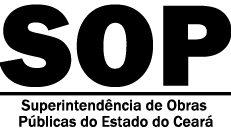
<style>
.page{position:relative;width:231px;height:131px;background:#ffffff}
.page>*{position:absolute;margin:0}
.t1{font:120px "FranklinGothic-Heavy";color:#000000}
.t2{font:16px "FranklinGothic-Medium";color:#000000}
</style>
<div class="page">
<p class="t1" style="left:0px;top:4px;width:232px;height:83px">SOP</p>
<p class="t2" style="left:21px;top:98px;width:186px;height:16px">Superintendência de Obras</p>
<p class="t2" style="left:19px;top:115px;width:194px;height:12px">Públicas do Estado do Ceará</p>
</div>
